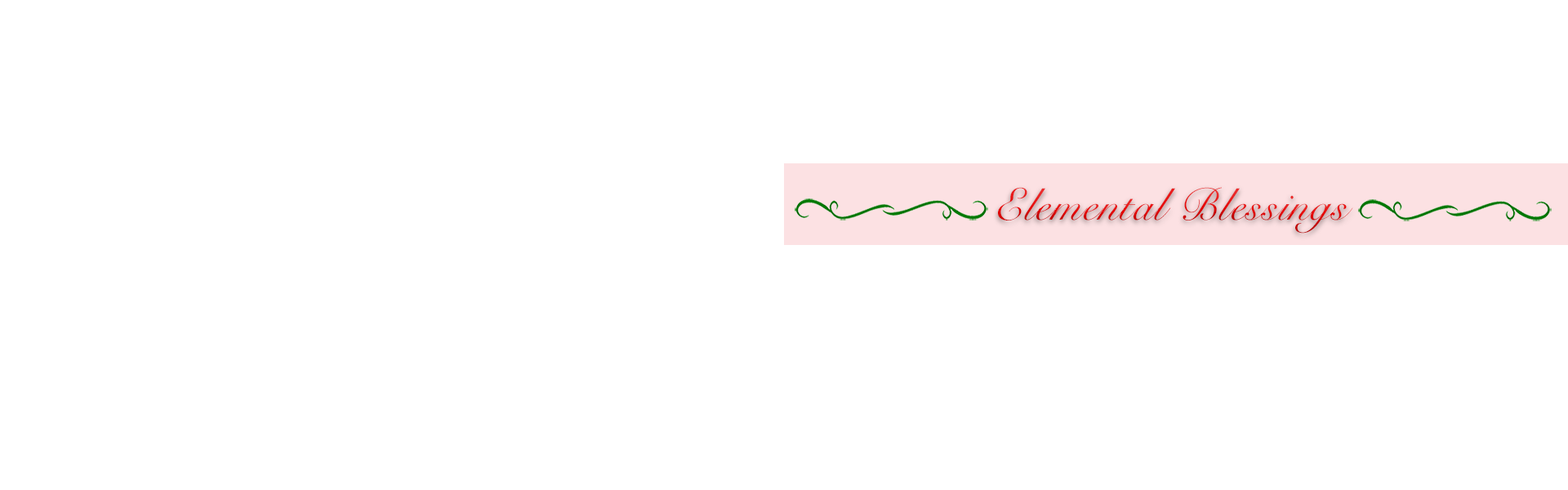
<style>
.page{position:relative;width:1568px;height:490px;background:#ffffff}
.page>*{position:absolute;margin:0}
.t1{font:44.9px "SnellRoundhand";letter-spacing:0.025em}
</style>
<div class="page">
<p class="t1" style="left:998px;top:187px;width:355px;height:47px">Elemental Blessings</p>
</div>
